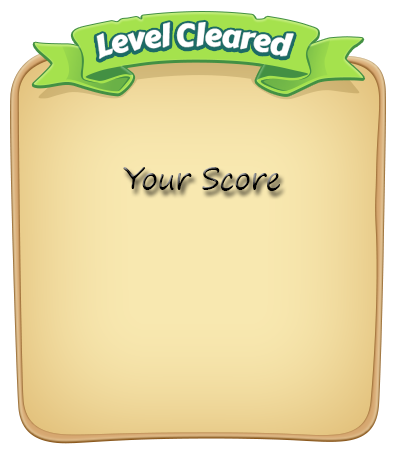
<style>
.page{position:relative;width:400px;height:470px}
.page>*{position:absolute;margin:0}
.t1{font:31.4px "CarterOne";letter-spacing:-0.02em;color:#ffffff;scale:0.95 1}
.t2{font:30px "SegoePrint";letter-spacing:-0.02em}
</style>
<div class="page">
<p class="t1" style="left:96px;top:22px;width:198px;height:37px">Level Cleared</p>
<p class="t2" style="left:123px;top:167px;width:157px;height:24px">Your Score</p>
</div>
